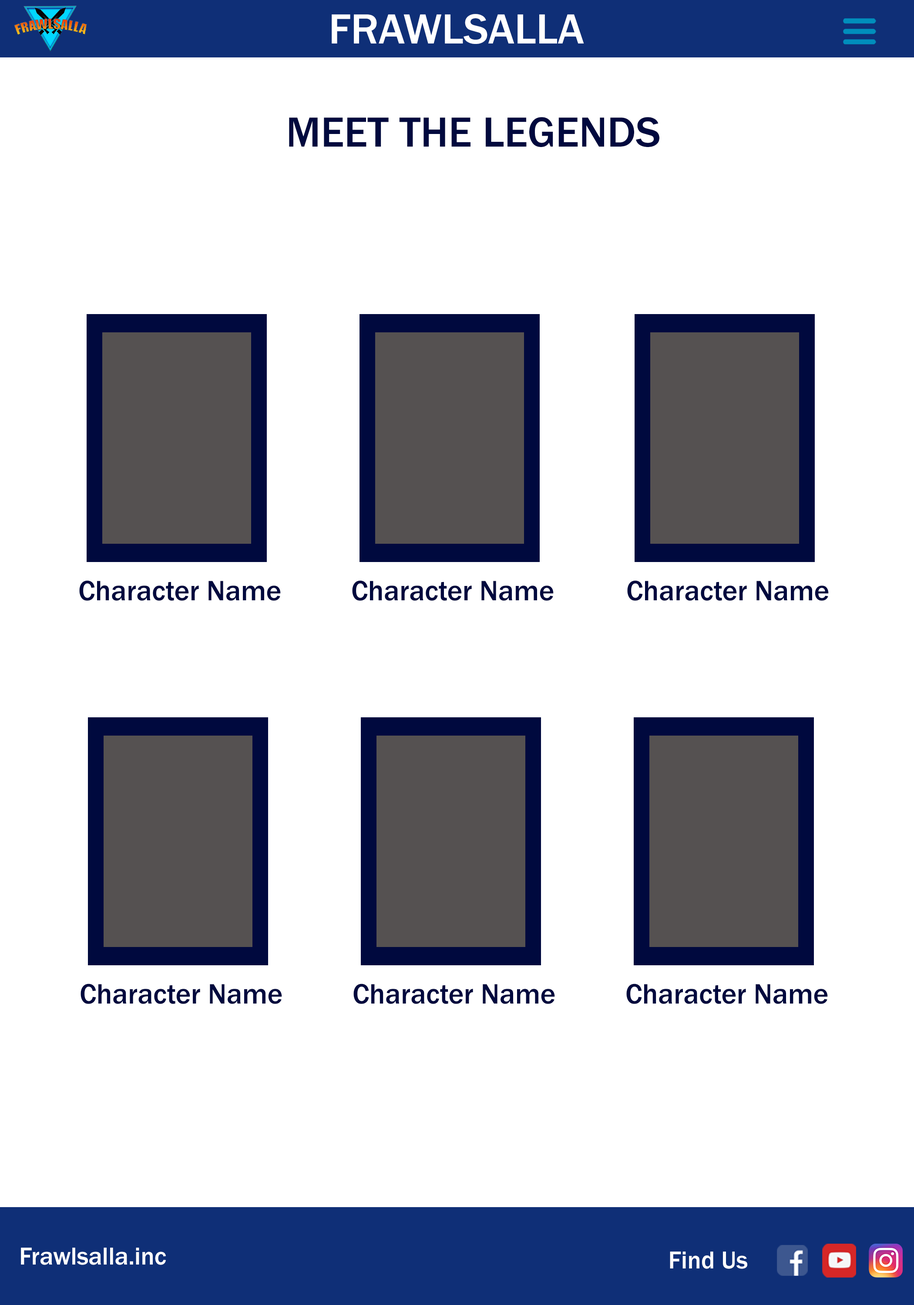
<style>
.page{position:relative;width:914px;height:1305px;background:#ffffff}
.page>*{position:absolute;margin:0}
.t1{font:43.5px "FranklinGothic-Medium";color:#ffffff}
.t2{font:43.5px "FranklinGothic-Medium";color:#00093e}
.t3{font:29px "FranklinGothic-Medium";color:#00093e}
.t4{font:25.4px "FranklinGothic-Medium";color:#ffffff}
</style>
<div class="page">
<p class="t1" style="left:332px;top:14px;width:252px;height:30px">FRAWLSALLA</p>
<p class="t2" style="left:289px;top:117px;width:370px;height:30px">MEET THE LEGENDS</p>
<p class="t3" style="left:79px;top:580px;width:202px;height:21px">Character Name</p>
<p class="t3" style="left:352px;top:580px;width:201px;height:21px">Character Name</p>
<p class="t3" style="left:627px;top:580px;width:201px;height:21px">Character Name</p>
<p class="t3" style="left:80px;top:984px;width:202px;height:20px">Character Name</p>
<p class="t3" style="left:353px;top:984px;width:202px;height:20px">Character Name</p>
<p class="t3" style="left:626px;top:984px;width:201px;height:20px">Character Name</p>
<p class="t4" style="left:21px;top:1248px;width:145px;height:17px">Frawlsalla.inc</p>
<p class="t4" style="left:670px;top:1252px;width:77px;height:17px">Find Us</p>
</div>
